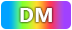
<style>
.page{position:relative;width:72px;height:30px}
.page>*{position:absolute;margin:0}
.t1{font:20px "SegoeUI-Bold";letter-spacing:0.02em;color:#ffffff}
</style>
<div class="page">
<p class="t1" style="left:20px;top:8px;width:32px;height:14px">DM</p>
</div>
